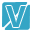
<style>
.page{position:relative;width:32px;height:32px;background:#34a5c5}
.page>*{position:absolute;margin:0}
.t1{font:30px "SegoeUI-Bold";color:#34a5c5}
</style>
<div class="page">
<p class="t1" style="left:6px;top:6px;width:20px;height:21px">V</p>
</div>
